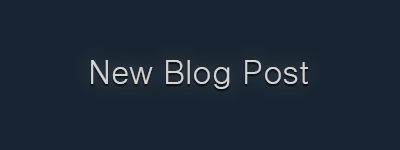
<style>
.page{position:relative;width:400px;height:150px;background:#182431}
.page>*{position:absolute;margin:0}
.t1{font:33px "Dotum";letter-spacing:-0.01em;color:#d3d3d3}
</style>
<div class="page">
<p class="t1" style="left:91px;top:60px;width:217px;height:29px">New Blog Post</p>
</div>
